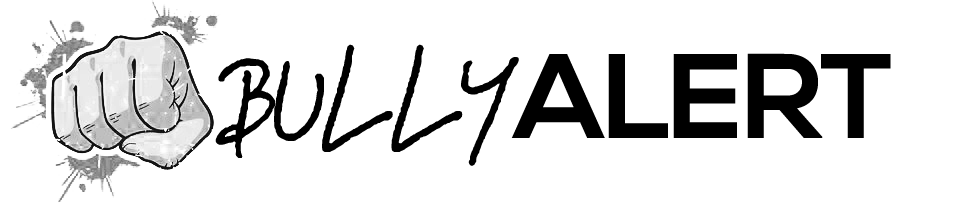
<style>
.page{position:relative;width:953px;height:208px;background:#ffffff}
.page>*{position:absolute;margin:0}
.t1{font:200px "Snake";letter-spacing:-0.05em;color:#000000}
.t2{font:120px "Nexa-XBold";letter-spacing:-0.05em;color:#000000}
</style>
<div class="page">
<p class="t1" style="left:215px;top:44px;width:676px;height:122px">BULLY<span class="t2">ALERT</span></p>
</div>
